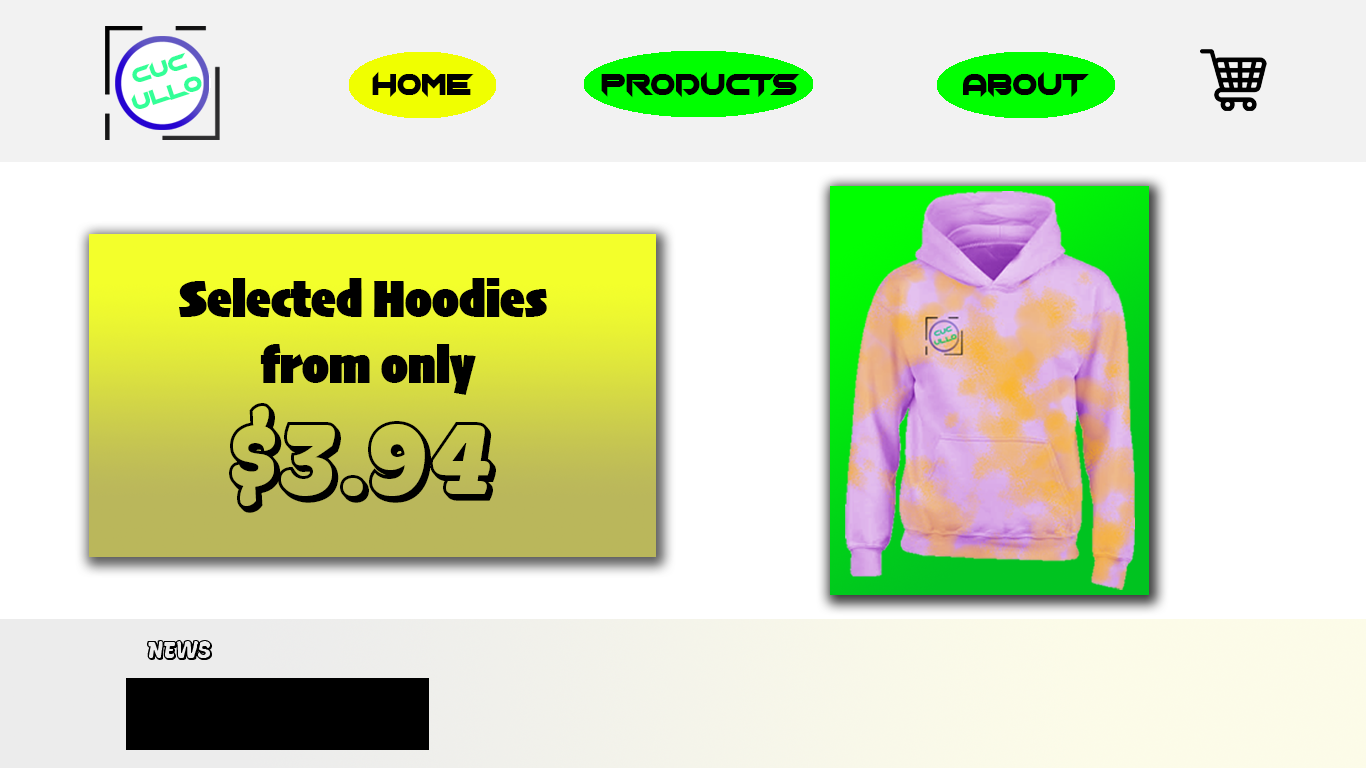
<style>
.page{position:relative;width:1366px;height:768px;background:#ffffff}
.page>*{position:absolute;margin:0}
.t1{font:21.3px "Chopsic";color:#33ff98;scale:1.06 1}
.t2{font:30px "Chopsic";color:#000000}
.t3{font:55px "Skia-BlackCondensed";color:#000000}
.t4{font:100px "LaPicaDemo-LaPicaDemo";color:#000000}
</style>
<div class="page">
<p class="t1" style="left:131px;top:52px;width:71px;height:57px;text-align:center;rotate:-18deg">cuc<br>ullo</p>
<p class="t2" style="left:372px;top:71px;width:102px;height:27px">Home</p>
<p class="t2" style="left:601px;top:71px;width:199px;height:27px">products</p>
<p class="t2" style="left:963px;top:71px;width:126px;height:27px">About</p>
<p class="t3" style="left:179px;top:278px;width:368px;height:117px;text-align:center">Selected Hoodies <br>from only</p>
<p class="t4" style="left:229px;top:403px;width:267px;height:110px">$3.94</p>
</div>
